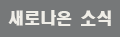
<style>
.page{position:relative;width:120px;height:37px;background:#767879}
.page>*{position:absolute;margin:0}
.t1{font:16px "HeadlineR-HM";color:#efede7}
</style>
<div class="page">
<p class="t1" style="left:8px;top:10px;width:103px;height:16px">새로나온 소식</p>
</div>
